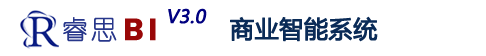
<style>
.page{position:relative;width:486px;height:56px;background:#ffffff}
.page>*{position:absolute;margin:0}
.t1{font:18px "MicrosoftYaHei";color:#000080;font-weight:bold;font-style:italic}
.t2{font:24px "MicrosoftYaHei";color:#0a2b57;font-weight:bold}
</style>
<div class="page">
<p class="t1" style="left:168px;top:8px;width:39px;height:16px">V3.0</p>
<p class="t2" style="left:230px;top:16px;width:148px;height:26px">商业智能系统</p>
</div>
